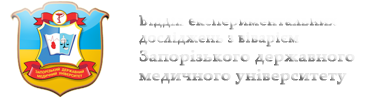
<style>
.page{position:relative;width:370px;height:97px;background:#ffffff}
.page>*{position:absolute;margin:0}
.t1{font:16px "PalatinoLinotype-Bold";font-weight:bold}
.t2{font:14px "PalatinoLinotype-Bold";font-weight:bold}
</style>
<div class="page">
<p class="t1" style="left:139px;top:15px;width:216px;height:70px"><span class="t2">Відділ експериментальних<br>досліджень з віварієм<br></span>Запорізького державного <br>медичного університету</p>
</div>
